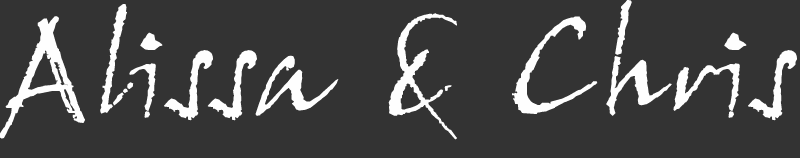
<style>
.page{position:relative;width:800px;height:158px;background:#333333}
.page>*{position:absolute;margin:0}
.t1{font:131.5px "JohnHandyLetPlain";color:#fefefe}
</style>
<div class="page">
<p class="t1" style="left:0px;top:0px;width:797px;height:140px">Alissa &amp; Chris</p>
</div>
